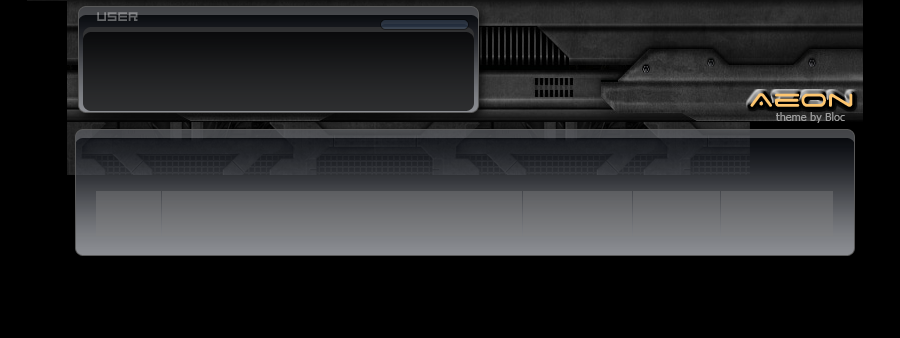
<style>
.page{position:relative;width:900px;height:338px;background:#000000}
.page>*{position:absolute;margin:0}
.t1{font:14px "04b08";color:#656769}
.t2{font:30px "SpaceAge";color:#fec66f}
.t3{font:11px "Tahoma";color:#9c9c9c}
</style>
<div class="page">
<p class="t1" style="left:97px;top:12px;width:41px;height:9px">User</p>
<p class="t2" style="left:750px;top:93px;width:103px;height:14px">Aeon</p>
<p class="t3" style="left:776px;top:112px;width:69px;height:11px">theme by Bloc</p>
</div>
